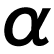
<style>
.page{position:relative;width:54px;height:54px;background:#ffffff}
.page>*{position:absolute;margin:0}
.t1{font:64px "HiraKakuProN-W6";color:#000000}
</style>
<div class="page">
<p class="t1" style="left:4px;top:7px;width:47px;height:40px">α</p>
</div>
